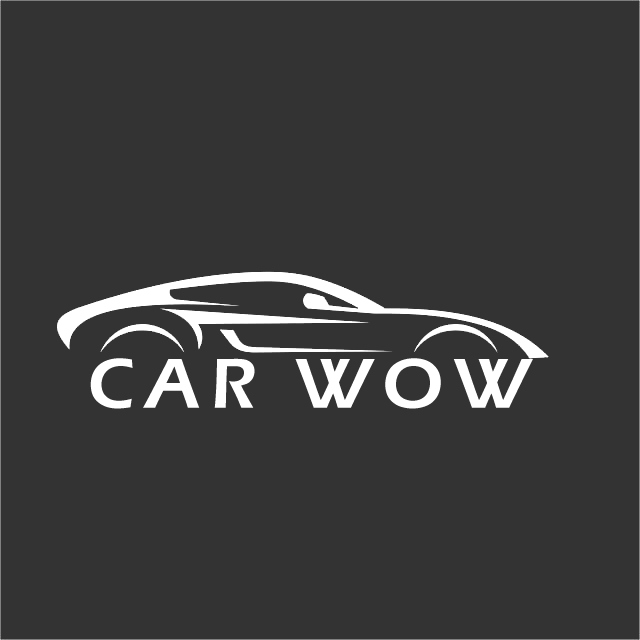
<style>
.page{position:relative;width:640px;height:640px;background:#333333}
.page>*{position:absolute;margin:0}
.t1{font:73px "ErasITC-Demi";letter-spacing:0.14em;color:#ffffff}
</style>
<div class="page">
<p class="t1" style="left:90px;top:358px;width:443px;height:51px">CAR WOW</p>
</div>
